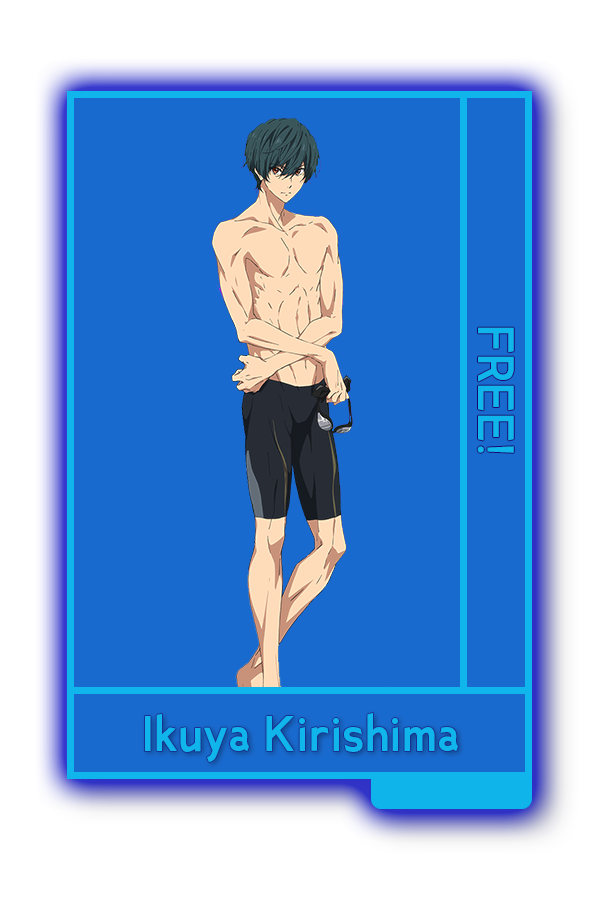
<style>
.page{position:relative;width:600px;height:900px;background:#196acf}
.page>*{position:absolute;margin:0}
.t1{font:47.8px "Ancillary-Bold";color:#0fb5eb}
.t2{font:46.7px "Ancillary-Bold";color:#0fb5eb}
</style>
<div class="page">
<p class="t1" style="left:477px;top:327px;width:37px;height:126px;rotate:90deg">FREE!</p>
<p class="t2" style="left:145px;top:713px;width:313px;height:49px">Ikuya Kirishima</p>
</div>
